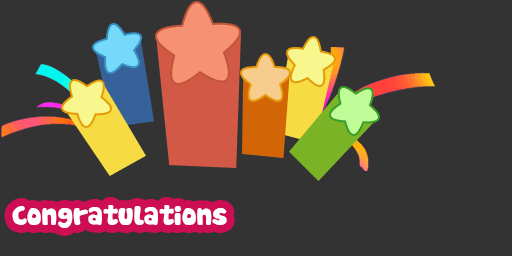
<style>
.page{position:relative;width:512px;height:256px;background:#333333}
.page>*{position:absolute;margin:0}
.t1{font:26.7px "Cookies";letter-spacing:-0.02em;color:#ffffff}
</style>
<div class="page">
<p class="t1" style="left:12px;top:205px;width:215px;height:23px">Congratulations</p>
</div>
